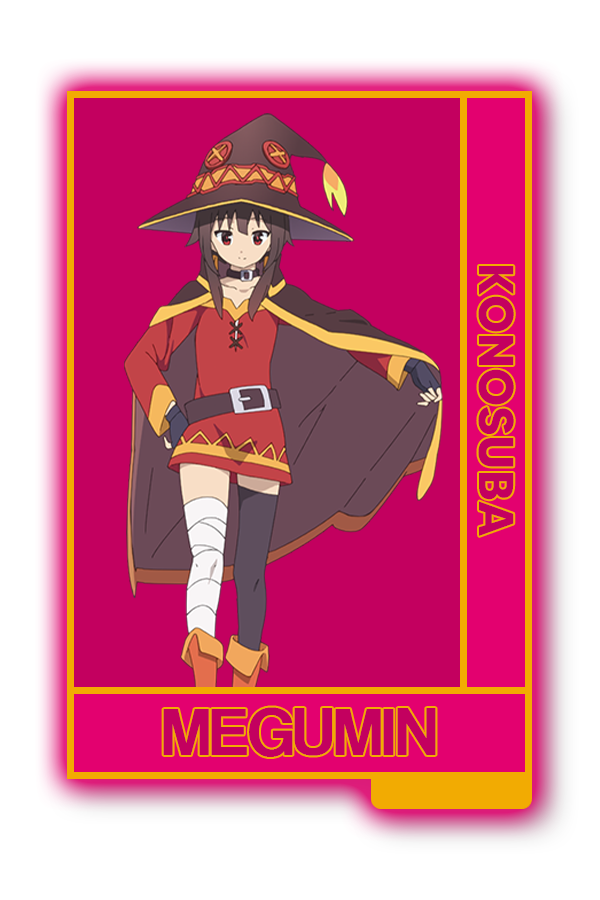
<style>
.page{position:relative;width:600px;height:900px;background:#c3005f}
.page>*{position:absolute;margin:0}
.t1{font:48.8px "MADETOMMY-Bold";color:#c3005f}
.t2{font:69.6px "CoolveticaRg-Regular";color:#c3005f}
</style>
<div class="page">
<p class="t1" style="left:478px;top:266px;width:36px;height:270px;rotate:90deg">KONOSUBA</p>
<p class="t2" style="left:163px;top:707px;width:273px;height:50px">MEGUMIN</p>
</div>
